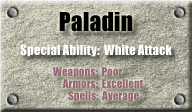
<style>
.page{position:relative;width:192px;height:112px}
.page>*{position:absolute;margin:0}
.t1{font:24px "Impact";color:#000000}
.t2{font:13px "Impact";color:#ffffff}
.t3{font:11px "Impact";color:#936478}
</style>
<div class="page">
<p class="t1" style="left:59px;top:12px;width:74px;height:20px">Paladin</p>
<p class="t2" style="left:20px;top:44px;width:152px;height:13px">Special Ability:  White Attack</p>
<p class="t3" style="left:53px;top:67px;width:69px;height:10px">Weapons:  Poor</p>
<p class="t3" style="left:62px;top:79px;width:81px;height:9px">Armors:  Excellent</p>
<p class="t3" style="left:68px;top:91px;width:71px;height:11px">Spells:  Average</p>
</div>
